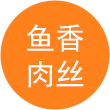
<style>
.page{position:relative;width:110px;height:110px;background:#ff811c}
.page>*{position:absolute;margin:0}
.t1{font:30px "SimHei";color:#ffffff}
</style>
<div class="page">
<p class="t1" style="left:27px;top:24px;width:57px;height:64px">鱼香<br>肉丝</p>
</div>
